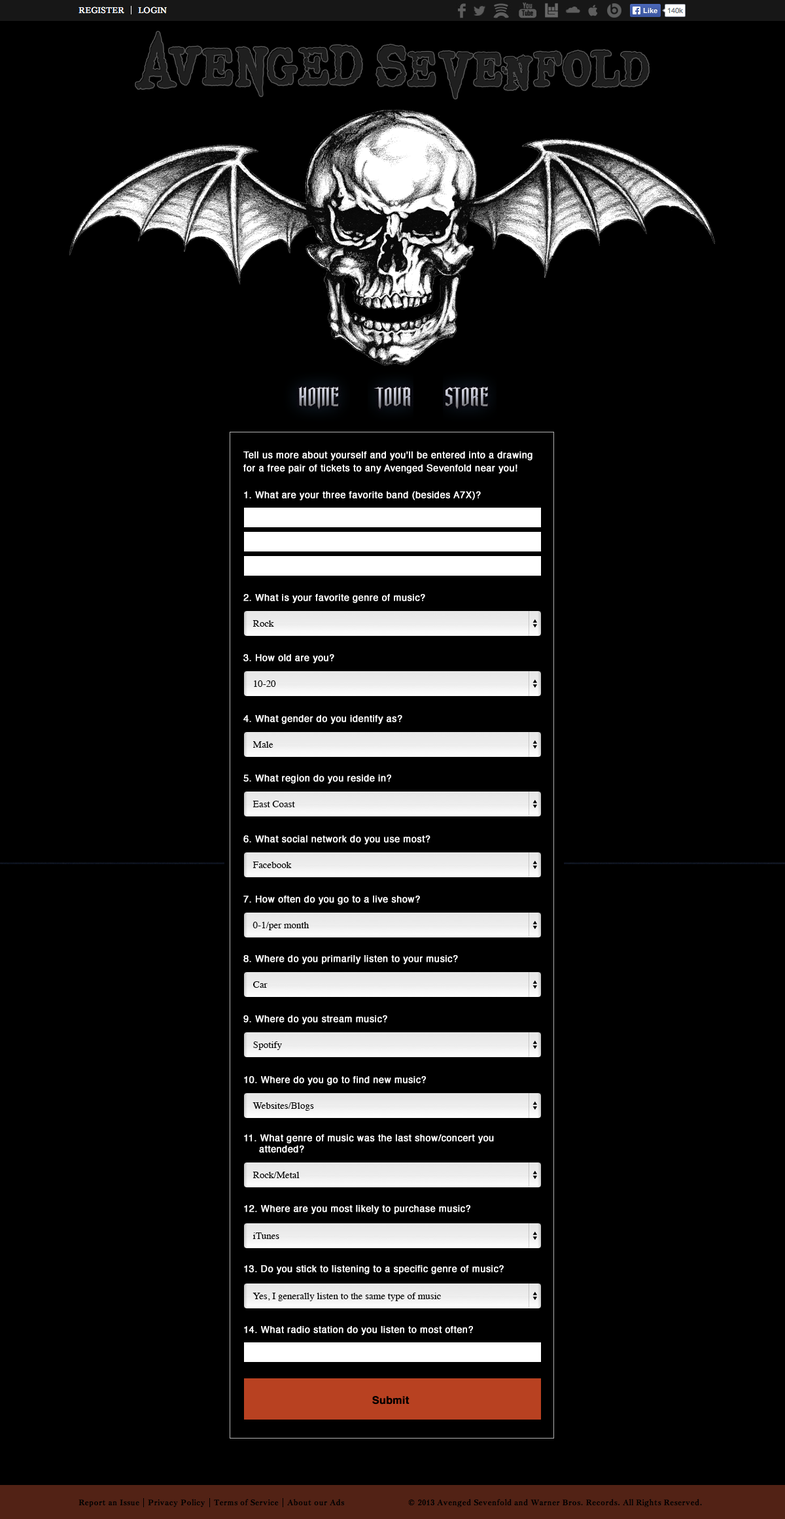
<style>
.page{position:relative;width:785px;height:1519px;background:#000000}
.page>*{position:absolute;margin:0}
.t1{font:9.2px/13.1px "Helvetica";letter-spacing:0.03em;color:#ffffff;font-weight:bold}
.t2{font:9.2px "Helvetica";letter-spacing:0.03em;color:#ffffff;font-weight:bold}
.t3{font:9.8px "Times-Roman";color:#000000}
.t4{font:9.2px/11.1px "Helvetica";letter-spacing:0.03em;color:#ffffff;font-weight:bold}
.t5{font:10.5px "Helvetica-Bold";color:#000000;font-weight:bold}
</style>
<div class="page">
<p class="t1" style="left:243px;top:451px;width:289px;height:23px">Tell us more about yourself and you'll be entered into a drawing for a free pair of tickets to any Avenged Sevenfold near you!</p>
<p class="t2" style="left:244px;top:491px;width:237px;height:9px">1. What are your three favorite band (besides A7X)?</p>
<p class="t2" style="left:243px;top:594px;width:182px;height:9px">2. What is your favorite genre of music?</p>
<p class="t3" style="left:253px;top:620px;width:21px;height:7px">Rock</p>
<p class="t2" style="left:243px;top:654px;width:91px;height:9px">3. How old are you?</p>
<p class="t3" style="left:254px;top:680px;width:22px;height:7px">10-20</p>
<p class="t2" style="left:243px;top:715px;width:159px;height:9px">4. What gender do you identify as?</p>
<p class="t3" style="left:253px;top:741px;width:20px;height:7px">Male</p>
<p class="t2" style="left:243px;top:775px;width:148px;height:9px">5. What region do you reside in?</p>
<p class="t3" style="left:253px;top:801px;width:42px;height:6px">East Coast</p>
<p class="t2" style="left:243px;top:835px;width:187px;height:10px">6. What social network do you use most?</p>
<p class="t3" style="left:253px;top:862px;width:39px;height:6px">Facebook</p>
<p class="t2" style="left:243px;top:896px;width:177px;height:9px">7. How often do you go to a live show?</p>
<p class="t3" style="left:253px;top:922px;width:56px;height:8px">0-1/per month</p>
<p class="t2" style="left:243px;top:955px;width:215px;height:9px">8. Where do you primarily listen to your music?</p>
<p class="t3" style="left:253px;top:981px;width:15px;height:7px">Car</p>
<p class="t2" style="left:243px;top:1015px;width:144px;height:9px">9. Where do you stream music?</p>
<p class="t3" style="left:253px;top:1041px;width:29px;height:9px">Spotify</p>
<p class="t2" style="left:244px;top:1076px;width:182px;height:9px">10. Where do you go to find new music?</p>
<p class="t3" style="left:253px;top:1102px;width:61px;height:9px">Websites/Blogs</p>
<p class="t4" style="left:244px;top:1134px;width:250px;height:19px">11. What genre of music was the last show/concert you        attended?</p>
<p class="t3" style="left:253px;top:1172px;width:47px;height:6px">Rock/Metal</p>
<p class="t2" style="left:244px;top:1205px;width:226px;height:9px">12. Where are you most likely to purchase music?</p>
<p class="t3" style="left:253px;top:1232px;width:26px;height:7px">iTunes</p>
<p class="t2" style="left:244px;top:1265px;width:260px;height:9px">13. Do you stick to listening to a specific genre of music?</p>
<p class="t3" style="left:253px;top:1293px;width:188px;height:8px">Yes, I generally listen to the same type of music</p>
<p class="t2" style="left:244px;top:1326px;width:229px;height:9px">14. What radio station do you listen to most often?</p>
<p class="t5" style="left:372px;top:1396px;width:38px;height:9px">Submit</p>
</div>
